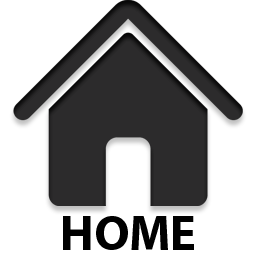
<style>
.page{position:relative;width:256px;height:256px;background:#ffffff}
.page>*{position:absolute;margin:0}
.t1{font:49px "MyriadPro-Bold";color:#000000}
</style>
<div class="page">
<p class="t1" style="left:63px;top:216px;width:131px;height:34px">HOME</p>
</div>
